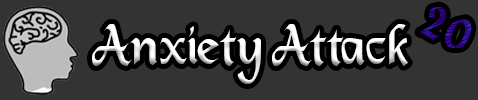
<style>
.page{position:relative;width:478px;height:100px;background:#333333}
.page>*{position:absolute;margin:0}
.t1{font:50px "DS_Mysticora"}
.t2{font:60px "DS_Mysticora";color:#ffffff}
</style>
<div class="page">
<p class="t1" style="left:419px;top:6px;width:53px;height:42px;rotate:27deg">20</p>
<p class="t2" style="left:92px;top:24px;width:316px;height:60px">Anxiety Attack</p>
</div>
